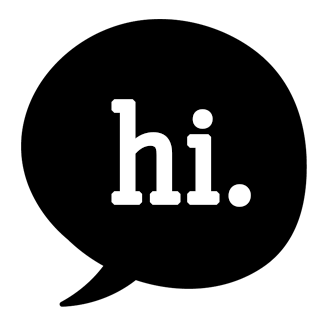
<style>
.page{position:relative;width:332px;height:332px;background:#000000}
.page>*{position:absolute;margin:0}
.t1{font:134.6px "Slabo27px-Regular";color:#ffffff;font-weight:bold}
</style>
<div class="page">
<p class="t1" style="left:111px;top:99px;width:140px;height:108px">hi.</p>
</div>
